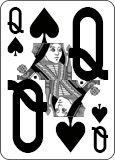
<style>
.page{position:relative;width:115px;height:160px;background:#ffffff}
.page>*{position:absolute;margin:0}
.t1{font:31.1px "CardCharacters";color:#000000;scale:0.95 1}
.t2{font:86.4px "CardCharacters";color:#000000;scale:0.83 1}
</style>
<div class="page">
<p class="t1" style="left:7px;top:7px;width:17px;height:27px">Q</p>
<p class="t2" style="left:68px;top:7px;width:41px;height:74px">Q</p>
<p class="t2" style="left:7px;top:79px;width:41px;height:74px;rotate:180deg">Q</p>
<p class="t1" style="left:91px;top:126px;width:17px;height:27px;rotate:180deg">Q</p>
</div>
